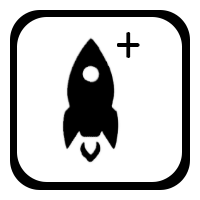
<style>
.page{position:relative;width:200px;height:200px;background:#ffffff}
.page>*{position:absolute;margin:0}
.t1{font:48px "LiSu";color:#000000}
</style>
<div class="page">
<p class="t1" style="left:118px;top:33px;width:21px;height:24px">+</p>
</div>
